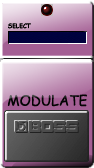
<style>
.page{position:relative;width:94px;height:168px}
.page>*{position:absolute;margin:0}
.t1{font:6px "ComicSansMS-Bold";color:#040404}
.t2{font:14px "ComicSansMS";color:#040404}
</style>
<div class="page">
<p class="t1" style="left:8px;top:23px;width:23px;height:6px">SELECT</p>
<p class="t2" style="left:7px;top:94px;width:80px;height:13px">MODULATE</p>
</div>
